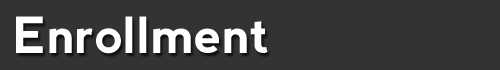
<style>
.page{position:relative;width:500px;height:70px;background:#333333}
.page>*{position:absolute;margin:0}
.t1{font:50px "nevis-Bold";color:#ffffff}
</style>
<div class="page">
<p class="t1" style="left:16px;top:16px;width:252px;height:38px">Enrollment</p>
</div>
